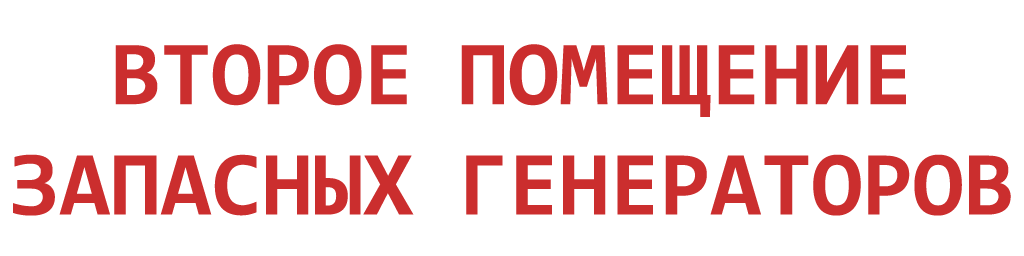
<style>
.page{position:relative;width:1024px;height:256px;background:#ffffff}
.page>*{position:absolute;margin:0}
.t1{font:92px "Consolas-Bold";color:#cb2e2e}
</style>
<div class="page">
<p class="t1" style="left:13px;top:44px;width:998px;height:172px;text-align:center">ВТОРОЕ ПОМЕЩЕНИЕ<br>ЗАПАСНЫХ ГЕНЕРАТОРОВ</p>
</div>
